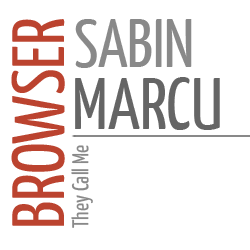
<style>
.page{position:relative;width:250px;height:250px;background:#ffffff}
.page>*{position:absolute;margin:0}
.t1{font:74px "YanoneKaffeesatz-Regular";color:#bb432f}
.t2{font:67.7px "YanoneKaffeesatz-Regular";color:#898989}
.t3{font:73.3px "YanoneKaffeesatz-Regular";color:#656565}
.t4{font:22.9px "YanoneKaffeesatz-Regular";color:#898989}
</style>
<div class="page">
<p class="t1" style="left:11px;top:19px;width:54px;height:207px;rotate:-90deg">BROWSER</p>
<p class="t2" style="left:75px;top:19px;width:117px;height:49px">SABIN</p>
<p class="t3" style="left:75px;top:77px;width:145px;height:53px">MARCU</p>
<p class="t4" style="left:71px;top:145px;width:22px;height:83px;rotate:-90deg">They Call Me</p>
</div>
